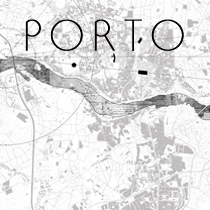
<style>
.page{position:relative;width:210px;height:210px}
.page>*{position:absolute;margin:0}
.t1{font:40px "SusannaRegular";letter-spacing:0.18em;color:#040000;font-weight:bold}
</style>
<div class="page">
<p class="t1" style="left:25px;top:19px;width:159px;height:32px">PORTO</p>
</div>
